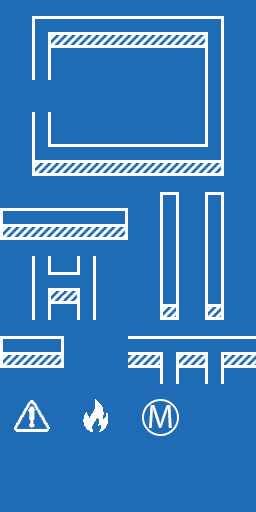
<style>
.page{position:relative;width:256px;height:512px;background:#1f6bb6}
.page>*{position:absolute;margin:0}
.t1{font:32.9px "MyriadPro-Regular";color:#ffffff}
</style>
<div class="page">
<p class="t1" style="left:149px;top:405px;width:23px;height:23px">M</p>
</div>
